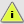
<style>
.page{position:relative;width:24px;height:24px;background:#e5e4e5}
.page>*{position:absolute;margin:0}
.t1{font:9.8px "Arial-Black";color:#000000}
</style>
<div class="page">
<p class="t1" style="left:11px;top:11px;width:3px;height:7px">i</p>
</div>
